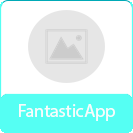
<style>
.page{position:relative;width:133px;height:133px;background:#ffffff}
.page>*{position:absolute;margin:0}
.t1{font:18px "MyriadPro-Regular";color:#fafcfc}
</style>
<div class="page">
<p class="t1" style="left:19px;top:104px;width:96px;height:17px">FantasticApp</p>
</div>
